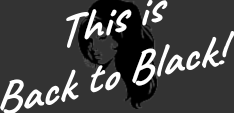
<style>
.page{position:relative;width:234px;height:113px;background:#333333}
.page>*{position:absolute;margin:0}
.t1{font:45.8px "Caveat-Bold";color:#ffffff}
</style>
<div class="page">
<p class="t1" style="left:0px;top:0px;width:235px;height:115px;text-align:center">This is<br>Back to Black!</p>
</div>
